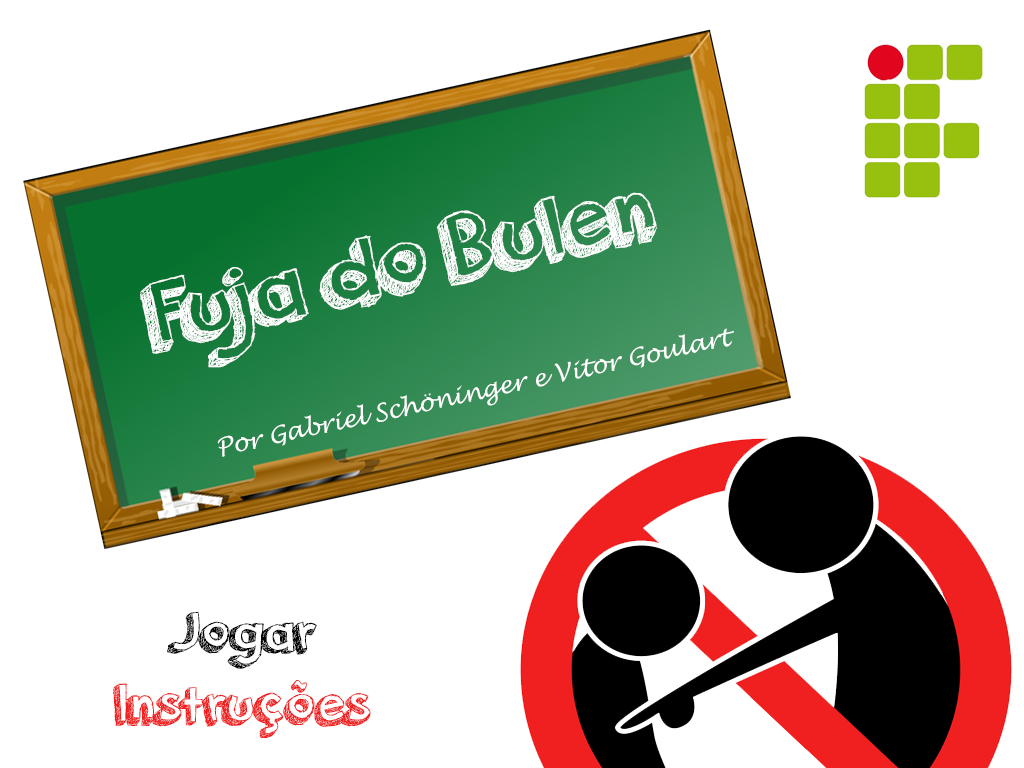
<style>
.page{position:relative;width:1024px;height:768px;background:#ffffff}
.page>*{position:absolute;margin:0}
.t1{font:100px "orangejuice";color:#ffffff}
.t2{font:24px "LucidaHandwriting-Italic";color:#ffffff}
.t3{font:60px "orangejuice";color:#f02020}
.t4{font:60px "orangejuice";color:#000000}
</style>
<div class="page">
<p class="t1" style="left:140px;top:192px;width:518px;height:176px;rotate:-13deg">Fuja do Bulen</p>
<p class="t2" style="left:217px;top:328px;width:517px;height:129px;rotate:-12deg">Por Gabriel Schöninger e Vitor Goulart</p>
<p class="t3" style="left:113px;top:611px;width:258px;height:128px;text-align:center"><span class="t4">Jogar<br></span>Instruções</p>
</div>
